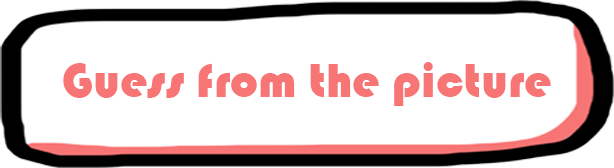
<style>
.page{position:relative;width:614px;height:168px;background:#ffffff}
.page>*{position:absolute;margin:0}
.t1{font:50px "Bauhaus93";color:#f87575}
</style>
<div class="page">
<p class="t1" style="left:63px;top:62px;width:488px;height:44px">Guess from the picture</p>
</div>
